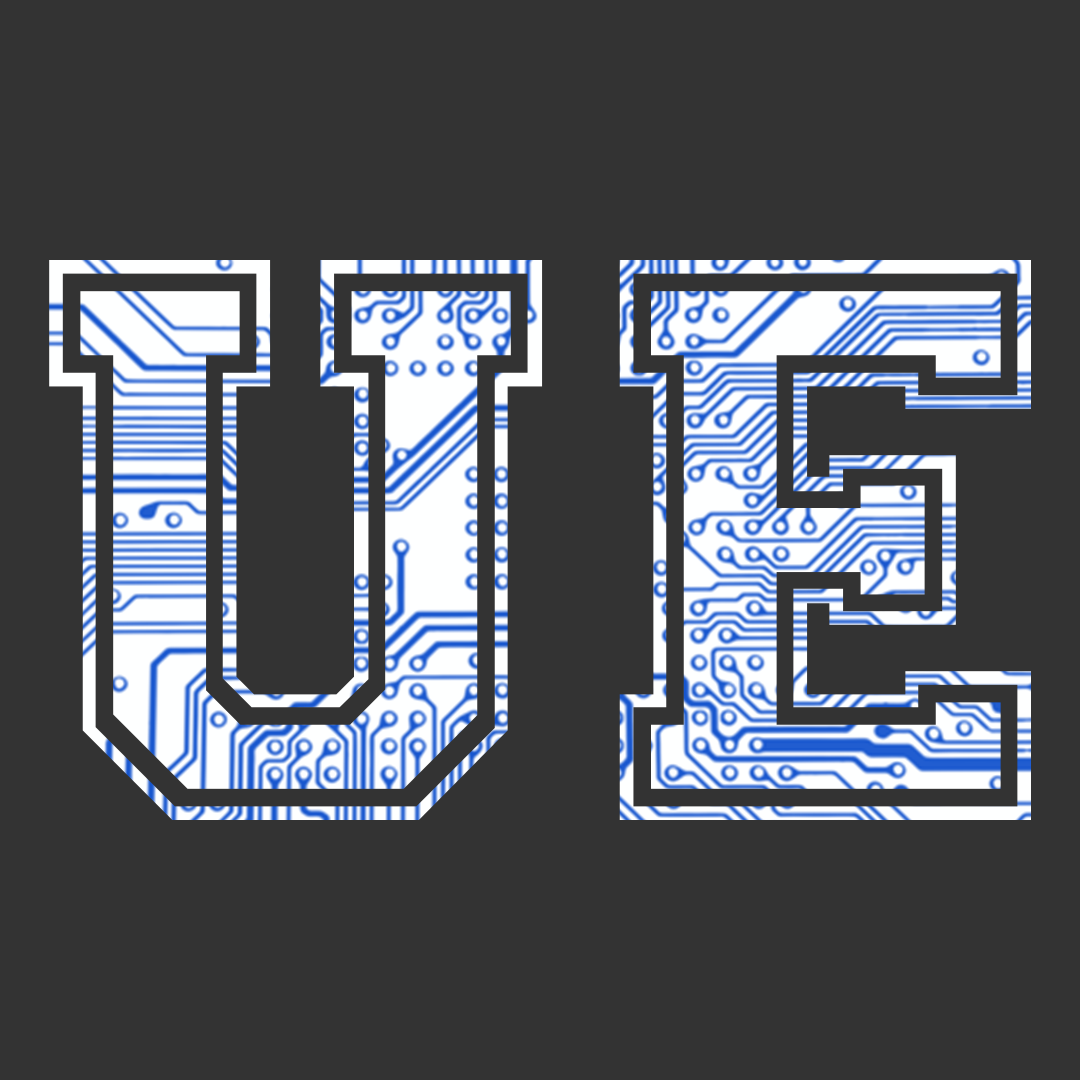
<style>
.page{position:relative;width:1080px;height:1080px;background:#333333}
.page>*{position:absolute;margin:0}
.t1{font:800px "Varsity-Regular"}
</style>
<div class="page">
<p class="t1" style="left:49px;top:260px;width:982px;height:560px">UE</p>
</div>
